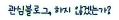
<style>
.page{position:relative;width:119px;height:20px;background:#ffffff}
.page>*{position:absolute;margin:0}
.t1{font:12px "CreChoM";letter-spacing:-0.075em;color:#0f0f35}
</style>
<div class="page">
<p class="t1" style="left:8px;top:4px;width:103px;height:13px">관심블로그, 하지 않겠는가?</p>
</div>
